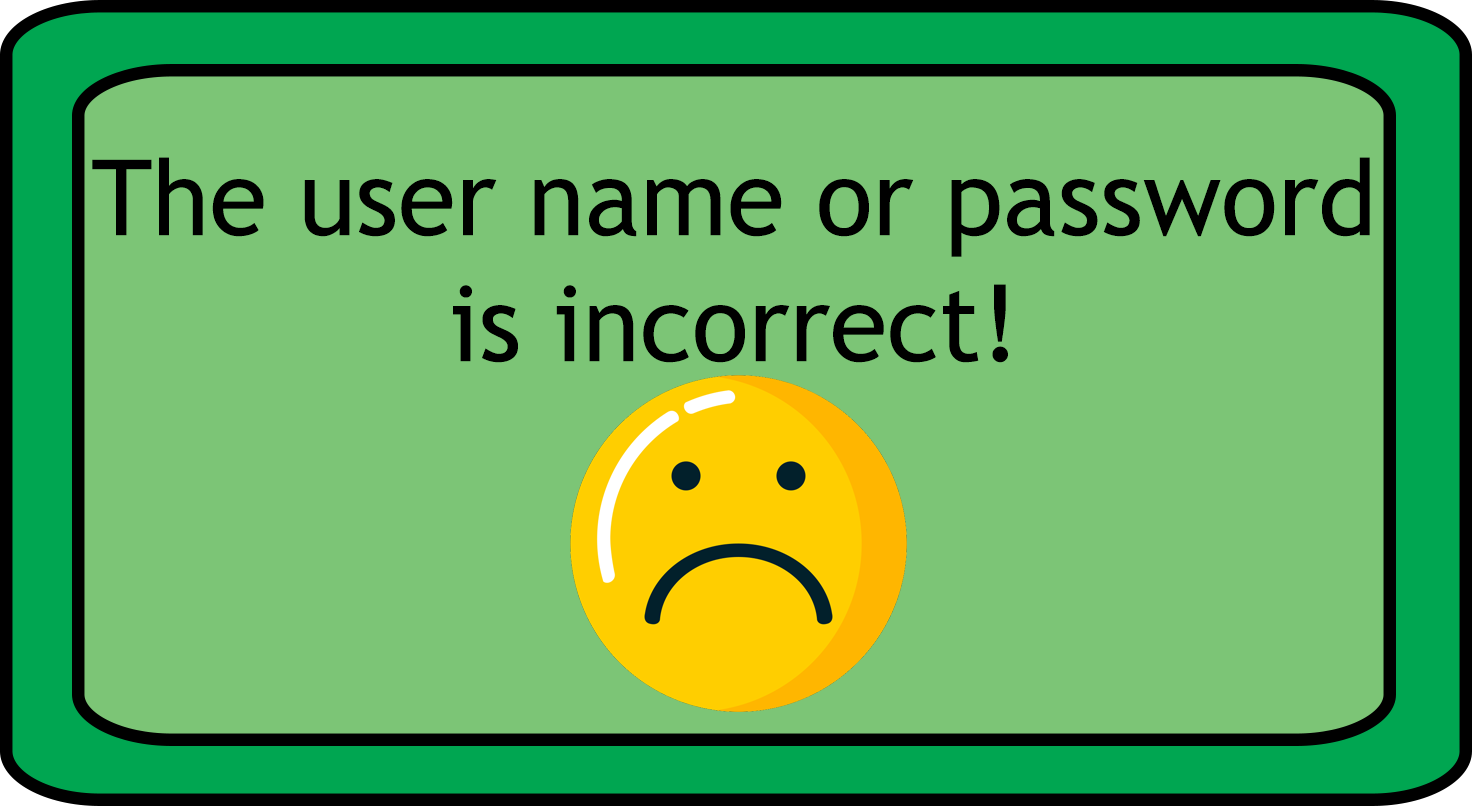
<style>
.page{position:relative;width:1472px;height:806px;background:#7cc576}
.page>*{position:absolute;margin:0}
.t1{font:105px "TrebuchetMS";color:#000000}
</style>
<div class="page">
<p class="t1" style="left:92px;top:157px;width:1278px;height:206px;text-align:center">The user name or password is incorrect!</p>
</div>
